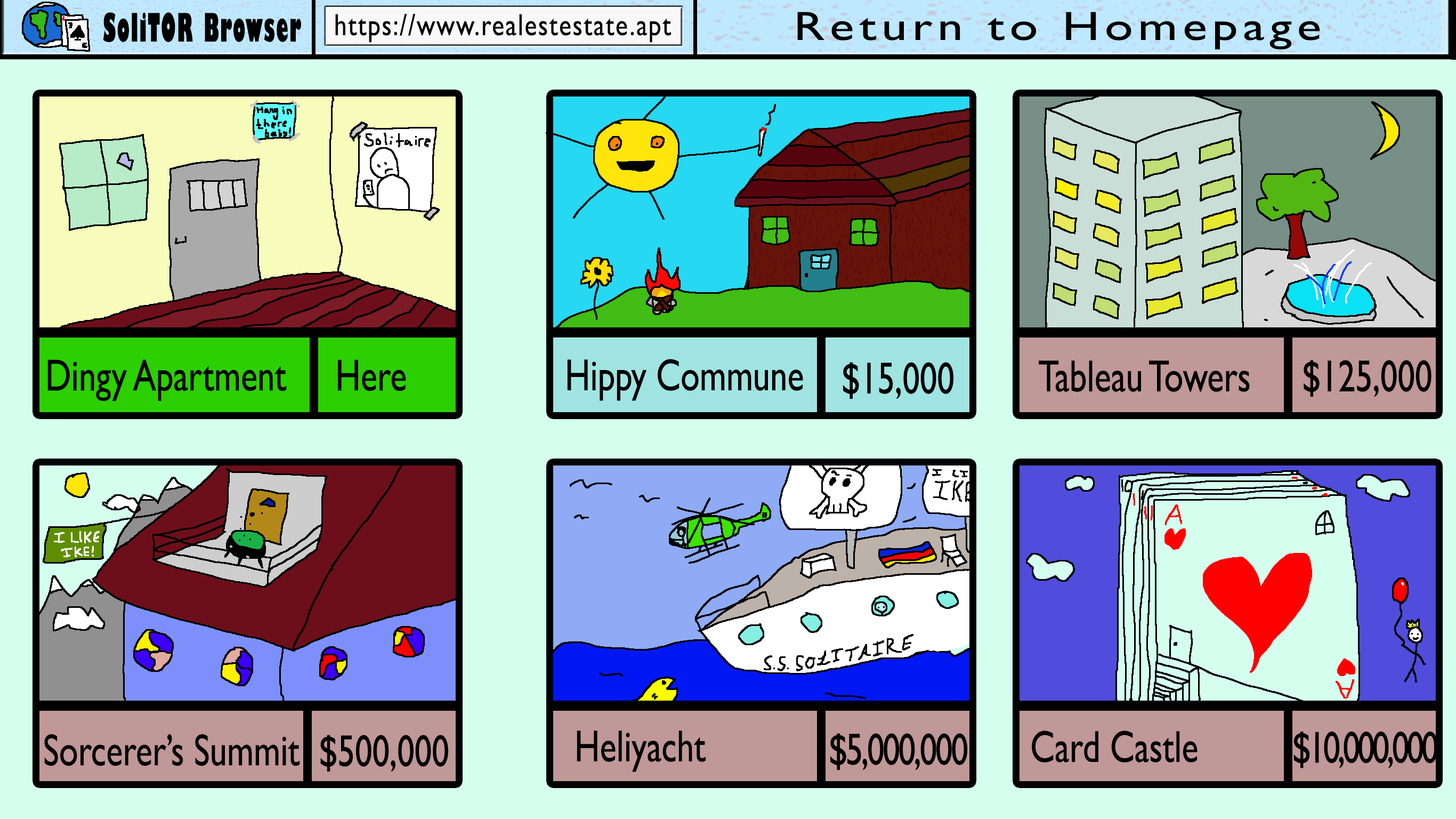
<style>
.page{position:relative;width:1456px;height:819px;background:#d4ffef}
.page>*{position:absolute;margin:0}
.t1{font:38.4px "GillSans-UltraBoldCondensed";letter-spacing:0.05em;color:#000000;scale:0.67 1}
.t2{font:30.7px "GillSansMT";letter-spacing:0.05em;color:#000000;scale:0.83 1}
.t3{font:40.9px "GillSansMT";letter-spacing:0.1em;color:#000000;scale:1.25 1}
.t4{font:45px "GillSansMT";color:#000000;scale:0.77 1}
.t5{font:45px "GillSansMT";letter-spacing:-0.05em;color:#000000;scale:0.77 1}
.t6{font:45px "GillSansMT";letter-spacing:-0.075em;color:#000000;scale:0.77 1}
</style>
<div class="page">
<p class="t1" style="left:103px;top:12px;width:198px;height:30px">SoliTOR Browser</p>
<p class="t2" style="left:335px;top:14px;width:336px;height:29px">https://www.realestestate.apt</p>
<p class="t3" style="left:797px;top:12px;width:523px;height:38px">Return to Homepage</p>
<p class="t4" style="left:47px;top:359px;width:240px;height:42px">Dingy Apartment</p>
<p class="t4" style="left:338px;top:359px;width:68px;height:32px">Here</p>
<p class="t4" style="left:567px;top:359px;width:236px;height:42px">Hippy Commune</p>
<p class="t4" style="left:843px;top:362px;width:111px;height:37px">$15,000</p>
<p class="t4" style="left:1039px;top:360px;width:211px;height:32px">Tableau Towers</p>
<p class="t4" style="left:1304px;top:360px;width:128px;height:37px">$125,000</p>
<p class="t4" style="left:44px;top:734px;width:256px;height:32px">Sorcerer’s Summit</p>
<p class="t4" style="left:320px;top:735px;width:128px;height:36px">$500,000</p>
<p class="t4" style="left:577px;top:730px;width:129px;height:42px">Heliyacht</p>
<p class="t5" style="left:831px;top:733px;width:137px;height:37px">$5,000,000</p>
<p class="t4" style="left:1032px;top:730px;width:166px;height:32px">Card Castle</p>
<p class="t6" style="left:1294px;top:731px;width:144px;height:37px">$10,000,000</p>
</div>
